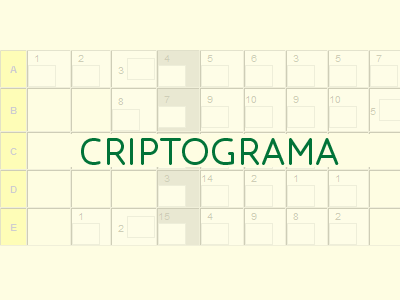
<style>
.page{position:relative;width:400px;height:300px;background:#fefde2}
.page>*{position:absolute;margin:0}
.t1{font:40px "CoreHumanistSans";color:#017338}
</style>
<div class="page">
<p class="t1" style="left:81px;top:138px;width:258px;height:27px">CRIPTOGRAMA</p>
</div>
